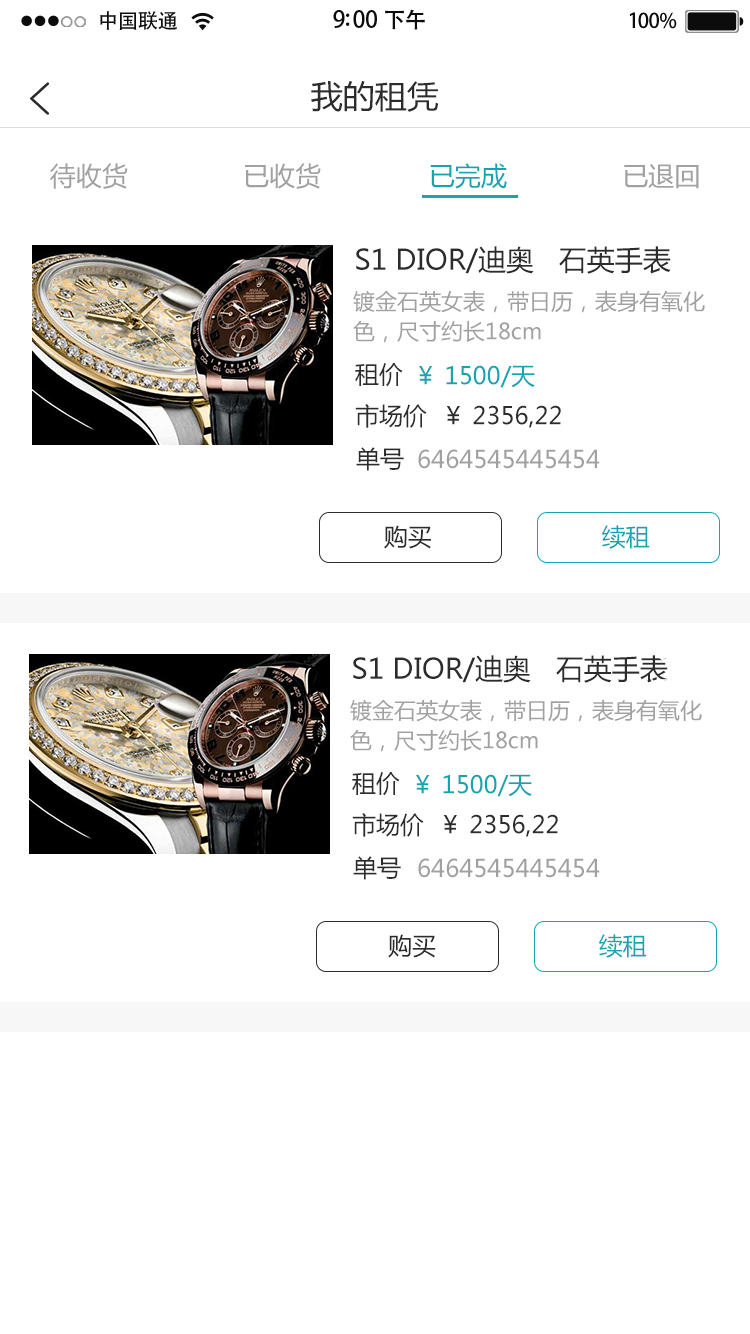
<style>
.page{position:relative;width:750px;height:1334px;background:#ffffff}
.page>*{position:absolute;margin:0}
.t1{font:20.4px "AdobeHeitiStd-Regular";letter-spacing:-0.02em;color:#000000}
.t2{font:23px "AdobeHeitiStd-Regular";letter-spacing:-0.02em;color:#000000}
.t3{font:22px "AdobeHeitiStd-Regular";letter-spacing:-0.02em;color:#000000}
.t4{font:20.4px "AdobeHeitiStd-Regular";letter-spacing:-0.02em;color:#010101}
.t5{font:32px "MicrosoftYaHei";color:#2c2c2c}
.t6{font:26px "MicrosoftYaHei";color:#a1a1a1}
.t7{font:26px "MicrosoftYaHei";color:#2c2c2c}
.t8{font:26px "MicrosoftYaHei";color:#16a4ae}
.t9{font:28px "MicrosoftYaHei";color:#2c2c2c}
.t10{font:22px/15px "MicrosoftYaHei";color:#a1a1a1}
.t11{font:24px "MicrosoftYaHei";color:#2c2c2c}
.t12{font:24px "MicrosoftYaHei";color:#16a4ae}
.t13{font:24px "MicrosoftYaHei";color:#a1a1a1}
</style>
<div class="page">
<p class="t1" style="left:100px;top:11px;width:77px;height:19px">中国联通</p>
<p class="t2" style="left:333px;top:9px;width:92px;height:21px">9:00 <span class="t3">下午</span></p>
<p class="t4" style="left:629px;top:12px;width:48px;height:17px">100%</p>
<p class="t5" style="left:311px;top:81px;width:127px;height:31px">我的租凭</p>
<p class="t6" style="left:50px;top:163px;width:649px;height:26px"><span class="t7"> </span>待收货               已收货              <span class="t8">已完成        </span>       已退回</p>
<p class="t9" style="left:356px;top:246px;width:315px;height:28px">S1 DIOR/迪奥   石英手表</p>
<p class="t10" style="left:353px;top:290px;width:352px;height:53px">镀金石英女表，带日历，表身有氧化<br><br>色，尺寸约长18cm</p>
<p class="t11" style="left:355px;top:363px;width:48px;height:24px">租价</p>
<p class="t12" style="left:419px;top:365px;width:116px;height:23px">￥ 1500/天</p>
<p class="t11" style="left:355px;top:404px;width:206px;height:24px">市场价  ￥ 2356,22</p>
<p class="t11" style="left:356px;top:447px;width:48px;height:24px">单号</p>
<p class="t13" style="left:418px;top:449px;width:182px;height:20px">6464545445454</p>
<p class="t11" style="left:384px;top:525px;width:47px;height:24px"><span class="t12">   </span>购买</p>
<p class="t12" style="left:602px;top:525px;width:48px;height:24px">续租</p>
<p class="t9" style="left:353px;top:655px;width:315px;height:28px">S1 DIOR/迪奥   石英手表</p>
<p class="t10" style="left:350px;top:699px;width:352px;height:53px">镀金石英女表，带日历，表身有氧化<br><br>色，尺寸约长18cm</p>
<p class="t11" style="left:352px;top:772px;width:48px;height:24px">租价</p>
<p class="t12" style="left:416px;top:774px;width:116px;height:23px">￥ 1500/天</p>
<p class="t11" style="left:352px;top:813px;width:206px;height:24px">市场价  ￥ 2356,22</p>
<p class="t11" style="left:353px;top:856px;width:48px;height:24px">单号</p>
<p class="t13" style="left:418px;top:858px;width:182px;height:20px">6464545445454</p>
<p class="t11" style="left:388px;top:934px;width:48px;height:24px"><span class="t12">   </span> 购买</p>
<p class="t12" style="left:599px;top:934px;width:48px;height:24px">续租</p>
</div>
